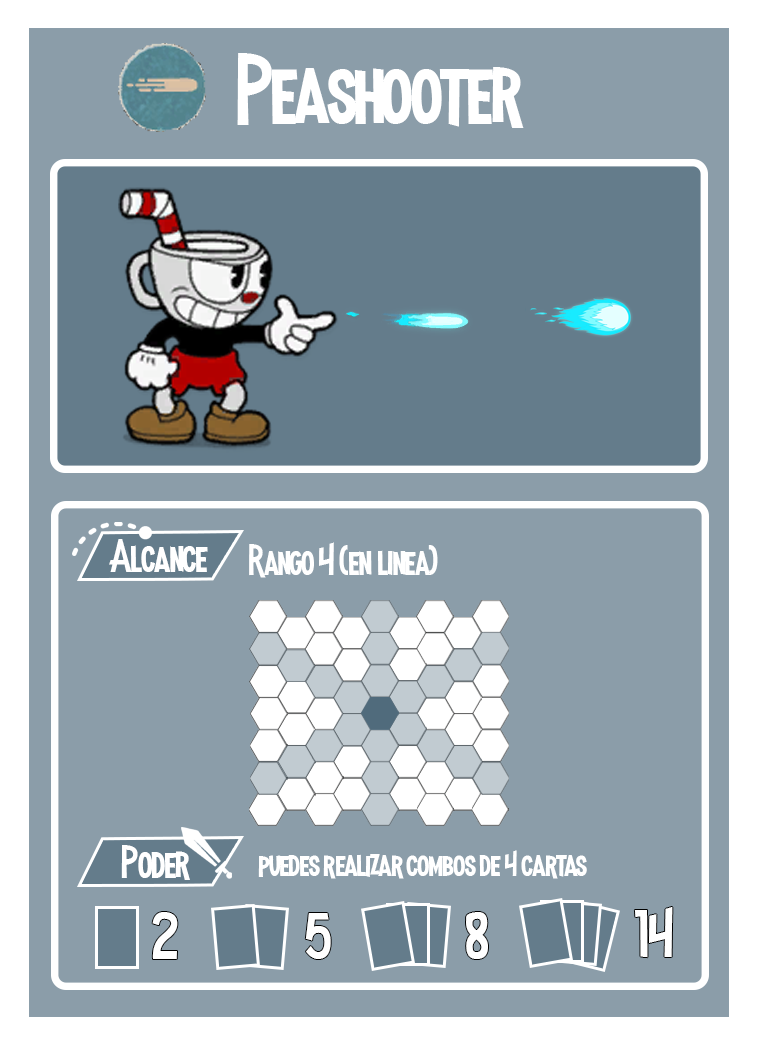
<style>
.page{position:relative;width:758px;height:1047px;background:#8b9da9}
.page>*{position:absolute;margin:0}
.t1{font:100px "MadnessHyperactive";color:#ffffff}
.t2{font:45.8px "MadnessHyperactive";color:#ffffff}
.t3{font:41.7px "MadnessHyperactive";color:#ffffff}
.t4{font:37.5px "MadnessHyperactive";color:#ffffff}
.t5{font:33.3px "MadnessHyperactive";color:#ffffff}
.t6{font:66.3px "MadnessHyperactive";color:#ffffff}
</style>
<div class="page">
<p class="t1" style="left:237px;top:53px;width:287px;height:75px">Peashooter</p>
<p class="t2" style="left:109px;top:539px;width:99px;height:33px">Alcance</p>
<p class="t3" style="left:249px;top:542px;width:189px;height:36px">Rango 4 (en linea)</p>
<p class="t2" style="left:121px;top:845px;width:69px;height:35px">Poder</p>
<p class="t4" style="left:258px;top:850px;width:329px;height:29px">puedes realizar combos de <span class="t5">4</span> cartas</p>
<p class="t6" style="left:152px;top:912px;width:26px;height:47px">2</p>
<p class="t6" style="left:305px;top:913px;width:26px;height:46px">5</p>
<p class="t6" style="left:466px;top:912px;width:22px;height:47px">8</p>
<p class="t6" style="left:634px;top:907px;width:39px;height:51px">14</p>
</div>
